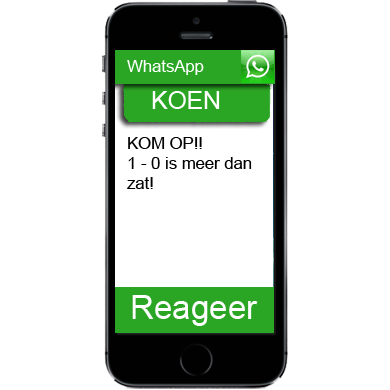
<style>
.page{position:relative;width:390px;height:390px;background:#ffffff}
.page>*{position:absolute;margin:0}
.t1{font:16.7px "ArialMT";color:#ffffff}
.t2{font:24.7px "ArialMT";color:#ffffff}
.t3{font:16.7px "ArialMT";color:#000000}
.t4{font:33.3px "ArialMT";color:#ffffff}
</style>
<div class="page">
<p class="t1" style="left:127px;top:60px;width:77px;height:15px">WhatsApp</p>
<p class="t2" style="left:152px;top:91px;width:68px;height:18px">KOEN</p>
<p class="t3" style="left:127px;top:137px;width:125px;height:52px">KOM OP!!<br>1 - 0 is meer dan<br>zat!</p>
<p class="t4" style="left:132px;top:295px;width:126px;height:31px">Reageer</p>
</div>
